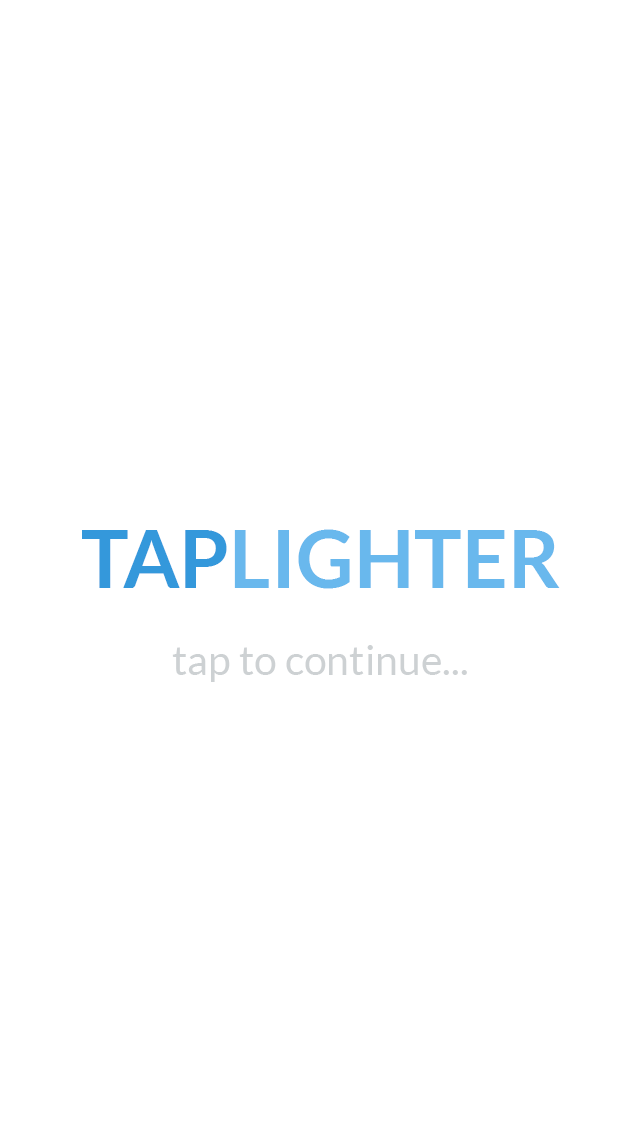
<style>
.page{position:relative;width:640px;height:1136px;background:#ffffff}
.page>*{position:absolute;margin:0}
.t1{font:80px "Lato-Bold";color:#69b8ed}
.t2{font:80px "Lato-Bold";color:#3498db}
.t3{font:41px "Lato-Regular";color:#cdd1d3}
</style>
<div class="page">
<p class="t1" style="left:82px;top:529px;width:478px;height:60px"><span class="t2">TAP</span>LIGHTER</p>
<p class="t3" style="left:172px;top:645px;width:295px;height:37px">tap to continue...</p>
</div>
